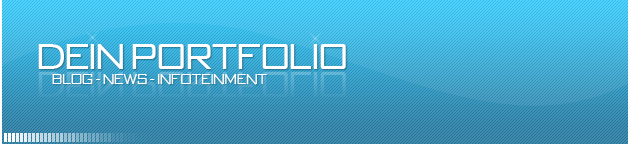
<style>
.page{position:relative;width:628px;height:146px}
.page>*{position:absolute;margin:0}
.t1{font:36px "BankGothic-Regular";color:#ffffff}
.t2{font:14px "BankGothic-Regular";color:#ffffff}
</style>
<div class="page">
<p class="t1" style="left:38px;top:44px;width:308px;height:25px">Dein Portfolio</p>
<p class="t2" style="left:52px;top:74px;width:215px;height:11px">Blog - News - Infoteinment</p>
</div>
